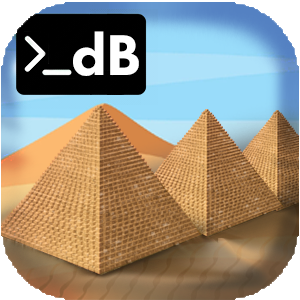
<style>
.page{position:relative;width:300px;height:300px}
.page>*{position:absolute;margin:0}
.t1{font:59.4px "FuturaPT-Heavy";color:#ffffff}
</style>
<div class="page">
<p class="t1" style="left:73px;top:31px;width:66px;height:45px">dB</p>
</div>
